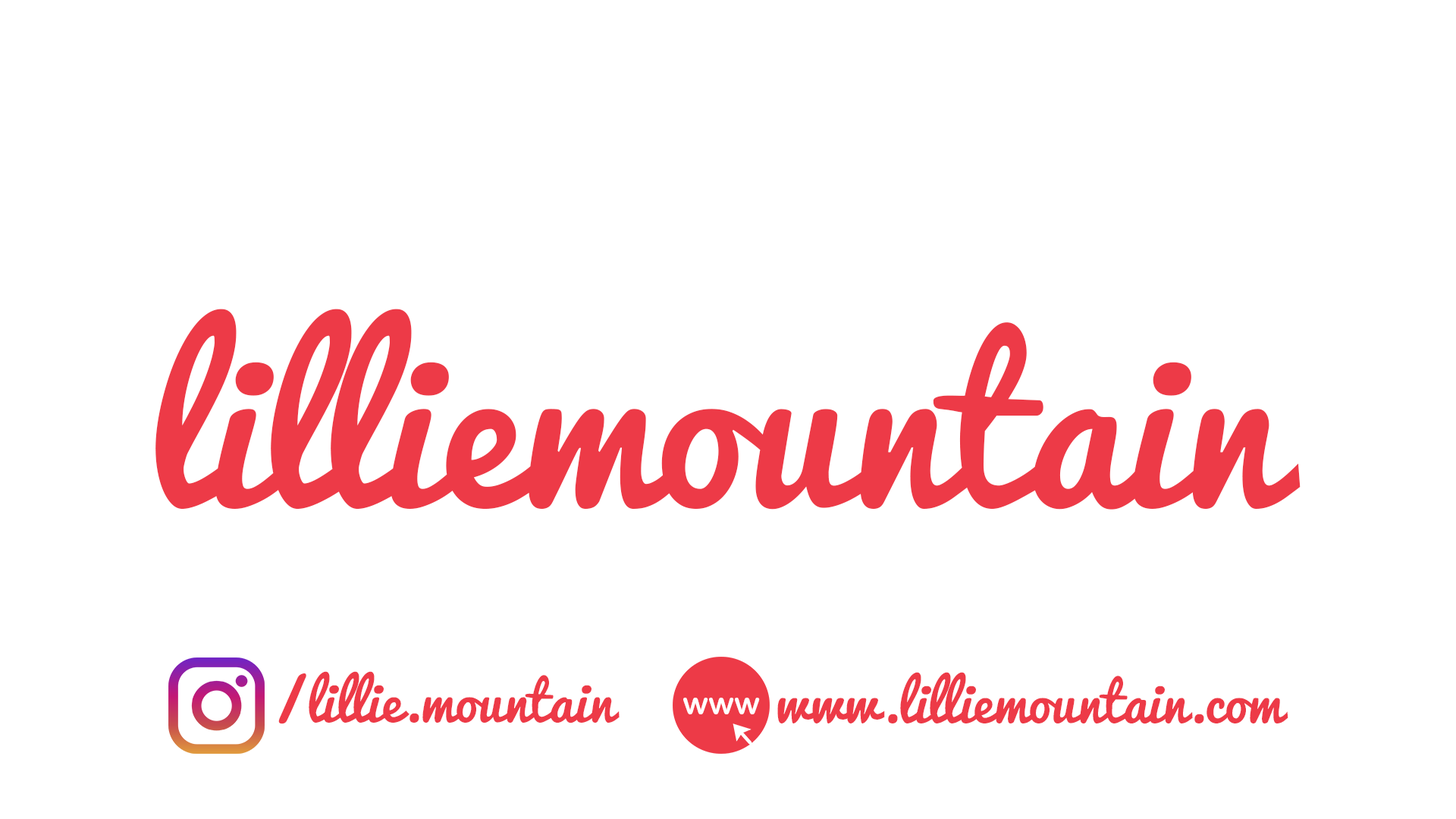
<style>
.page{position:relative;width:1456px;height:819px;background:#ffffff}
.page>*{position:absolute;margin:0}
.t1{font:213.3px "Pacifico-Regular";color:#ed3a47}
.t2{font:54.4px "Pacifico-Regular";color:#ed3a47}
.t3{font:31.6px "ArialRoundedMTBold";color:#ffffff}
</style>
<div class="page">
<p class="t1" style="left:155px;top:309px;width:1146px;height:201px">lilliemountain</p>
<p class="t2" style="left:278px;top:671px;width:342px;height:53px">/lillie.mountain</p>
<p class="t2" style="left:777px;top:672px;width:511px;height:52px">www.lilliemountain.com</p>
<p class="t3" style="left:683px;top:698px;width:77px;height:16px">www</p>
</div>
